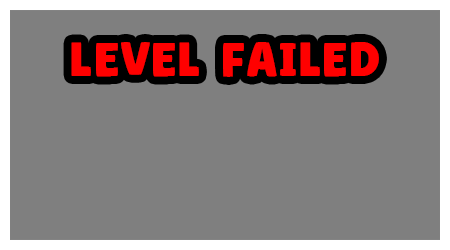
<style>
.page{position:relative;width:450px;height:250px;background:#7f7f7f}
.page>*{position:absolute;margin:0}
.t1{font:54.2px "SuperCorn";letter-spacing:0.04em;color:#ff0000}
</style>
<div class="page">
<p class="t1" style="left:71px;top:42px;width:308px;height:35px">Level Failed</p>
</div>
